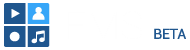
<style>
.page{position:relative;width:190px;height:50px;background:#ffffff}
.page>*{position:absolute;margin:0}
.t1{font:14px "Roboto-Regular";letter-spacing:-0.01em;color:#1f568e}
</style>
<div class="page">
<p class="t1" style="left:154px;top:28px;width:32px;height:11px">BETA</p>
</div>
